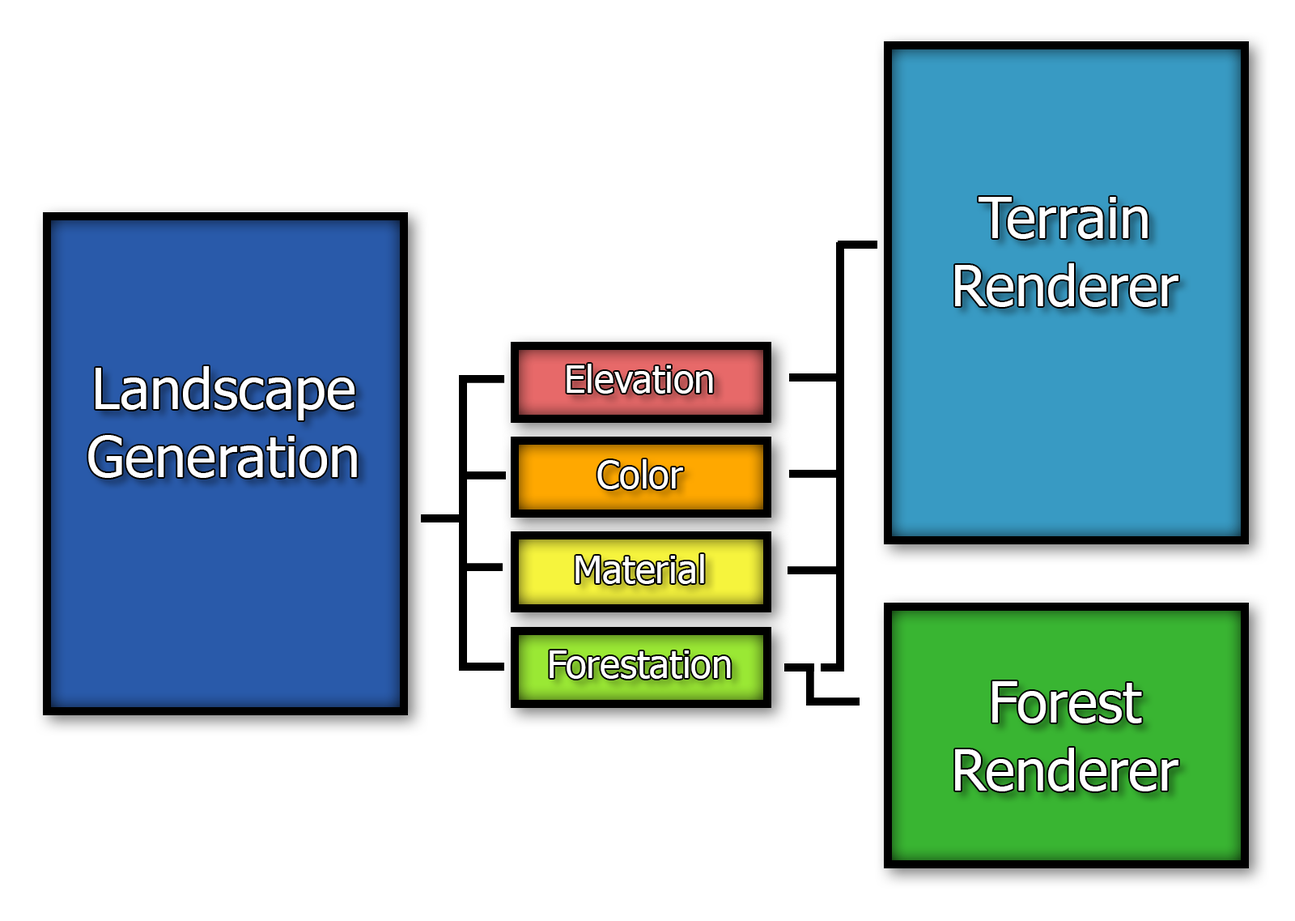
<style>
.page{position:relative;width:1295px;height:921px;background:#ffffff}
.page>*{position:absolute;margin:0}
.t1{font:56.9px "Tahoma";color:#ffffff}
.t2{font:38px "Tahoma";color:#ffffff}
</style>
<div class="page">
<p class="t1" style="left:955px;top:197px;width:224px;height:110px;text-align:center">Terrain<br>Renderer</p>
<p class="t1" style="left:88px;top:366px;width:269px;height:112px;text-align:center">Landscape<br>Generation</p>
<p class="t2" style="left:567px;top:364px;width:146px;height:29px">Elevation</p>
<p class="t2" style="left:597px;top:459px;width:86px;height:30px">Color</p>
<p class="t2" style="left:576px;top:554px;width:128px;height:30px">Material</p>
<p class="t2" style="left:550px;top:650px;width:181px;height:28px">Forestation</p>
<p class="t1" style="left:955px;top:681px;width:224px;height:110px;text-align:center">Forest<br>Renderer</p>
</div>
